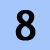
<style>
.page{position:relative;width:50px;height:50px;background:#a5c7fb}
.page>*{position:absolute;margin:0}
.t1{font:41.7px "TrebuchetMS";color:#000000;font-weight:bold}
</style>
<div class="page">
<p class="t1" style="left:15px;top:10px;width:21px;height:31px">8</p>
</div>
